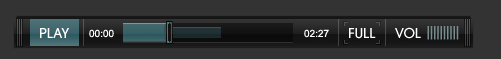
<style>
.page{position:relative;width:501px;height:59px;background:#333333}
.page>*{position:absolute;margin:0}
.t1{font:15px "AvantGardEF-Medium";color:#ffffff}
.t2{font:10px "ArialMT";color:#ffffff}
.t3{font:13px "AvantGardEF-Medium";letter-spacing:-0.25em;color:#778d8f}
</style>
<div class="page">
<p class="t1" style="left:40px;top:28px;width:29px;height:10px">PLAY</p>
<p class="t2" style="left:89px;top:29px;width:25px;height:9px">00:00</p>
<p class="t2" style="left:304px;top:29px;width:25px;height:9px">02:27</p>
<p class="t1" style="left:349px;top:28px;width:27px;height:11px">FULL</p>
<p class="t1" style="left:395px;top:27px;width:26px;height:12px">VOL</p>
<p class="t3" style="left:427px;top:26px;width:32px;height:14px">||||||||||</p>
</div>
